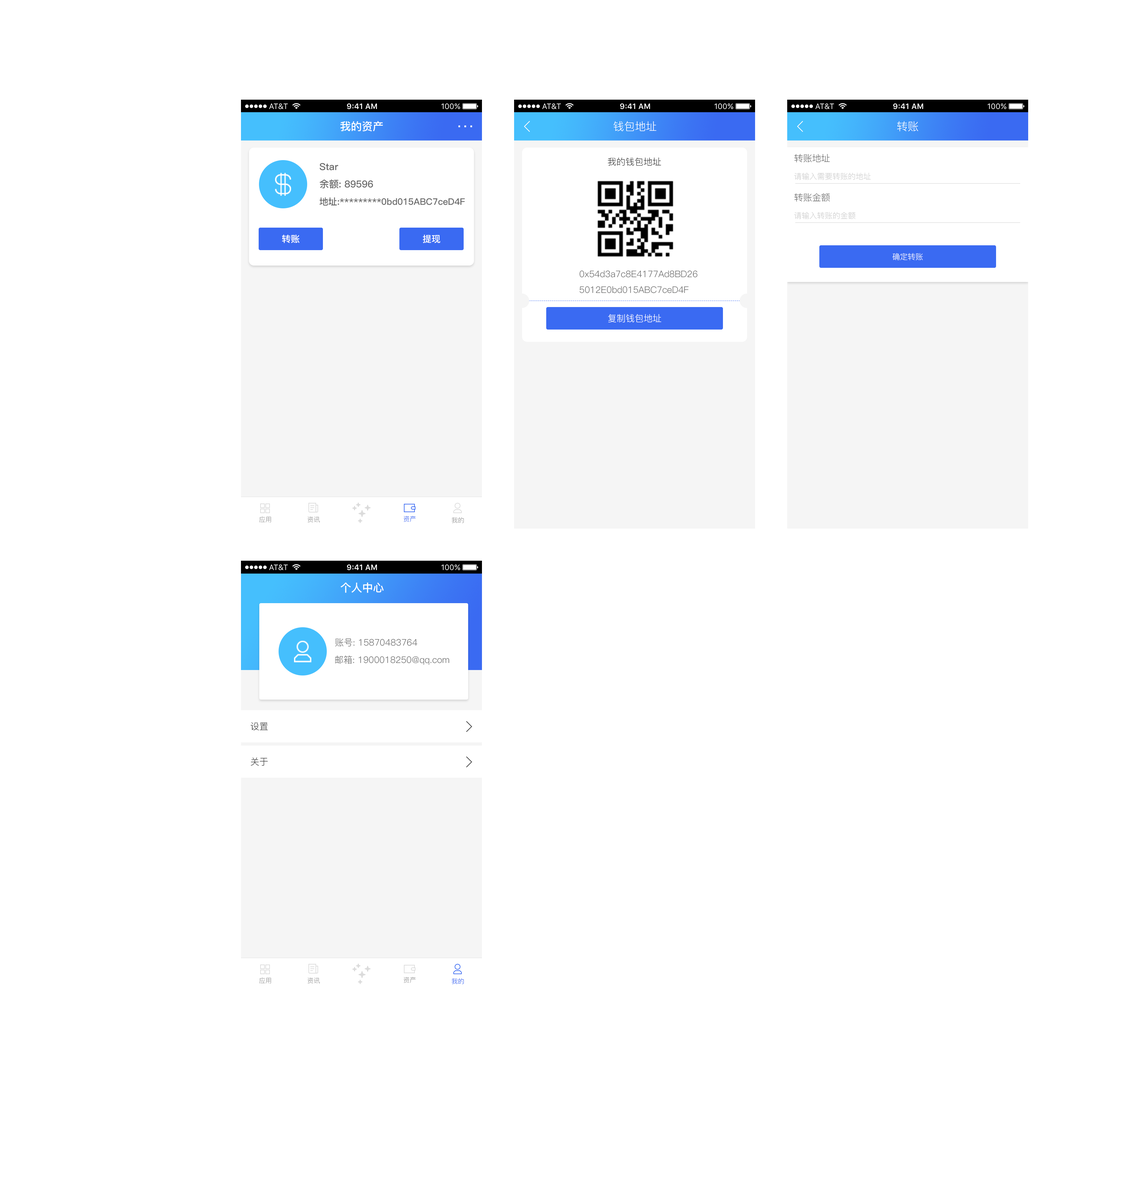
<style>
.page{position:relative;width:1140px;height:1187px;background:#ffffff}
.page>*{position:absolute;margin:0}
.t1{font:10.9px "PingFang-SC-Bold";color:#ffffff}
.t2{font:10.9px "PingFang-SC-Regular";color:#ffffff}
.t3{font:9px "PingFang-SC-Regular";color:#333333}
.t4{font:9px "PingFang-SC-Regular";color:#666666}
.t5{font:9.6px "PingFang-SC-Bold";color:#666666}
.t6{font:7.7px "PingFang-SC-Regular";color:#cccccc}
.t7{font:9px "PingFang-SC-Bold";color:#666666}
.t8{font:9px "PingFang-SC-Bold";color:#ffffff}
.t9{font:7.7px "PingFang-SC-Regular";color:#ffffff}
.t10{font:9px "PingFang-SC-Regular";color:#ffffff}
.t11{font:6.4px "PingFang-SC-Regular";color:#999999}
.t12{font:6.4px "PingFang-SC-Regular";color:#3a6af2}
</style>
<div class="page">
<p class="t1" style="left:340px;top:121px;width:43px;height:10px">我的资产</p>
<p class="t2" style="left:614px;top:121px;width:43px;height:10px">钱包地址</p>
<p class="t2" style="left:897px;top:121px;width:22px;height:10px">转账</p>
<p class="t3" style="left:608px;top:158px;width:54px;height:8px">我的钱包地址</p>
<p class="t4" style="left:795px;top:154px;width:35px;height:8px">转账地址</p>
<p class="t5" style="left:320px;top:163px;width:18px;height:7px">Star</p>
<p class="t6" style="left:794px;top:173px;width:77px;height:7px">请输入需要转账的地址</p>
<p class="t5" style="left:320px;top:179px;width:53px;height:9px">余额: 89596</p>
<p class="t7" style="left:320px;top:197px;width:145px;height:9px">地址:*********0bd015ABC7ceD4F</p>
<p class="t4" style="left:795px;top:193px;width:35px;height:9px">转账金额</p>
<p class="t6" style="left:794px;top:212px;width:62px;height:7px">请输入转账的金额</p>
<p class="t8" style="left:282px;top:235px;width:18px;height:8px">转账</p>
<p class="t8" style="left:423px;top:235px;width:17px;height:8px">提现</p>
<p class="t9" style="left:893px;top:253px;width:30px;height:7px">确定转账</p>
<p class="t4" style="left:580px;top:270px;width:118px;height:23px">0x54d3a7c8E4177Ad8BD26<br>5012E0bd015ABC7ceD4F</p>
<p class="t10" style="left:608px;top:314px;width:54px;height:8px">复制钱包地址</p>
<p class="t11" style="left:259px;top:516px;width:12px;height:6px">应用</p>
<p class="t11" style="left:308px;top:516px;width:12px;height:7px">资讯</p>
<p class="t12" style="left:404px;top:516px;width:12px;height:6px">资产</p>
<p class="t11" style="left:452px;top:517px;width:12px;height:6px">我的</p>
<p class="t1" style="left:341px;top:582px;width:43px;height:11px">个人中心</p>
<p class="t4" style="left:335px;top:638px;width:83px;height:8px">账号: 15870483764</p>
<p class="t4" style="left:335px;top:655px;width:114px;height:10px">邮箱: 1900018250@qq.com</p>
<p class="t3" style="left:251px;top:722px;width:17px;height:8px">设置</p>
<p class="t3" style="left:251px;top:757px;width:17px;height:9px">关于</p>
<p class="t11" style="left:259px;top:977px;width:12px;height:6px">应用</p>
<p class="t11" style="left:308px;top:977px;width:12px;height:7px">资讯</p>
<p class="t11" style="left:404px;top:977px;width:12px;height:6px">资产</p>
<p class="t12" style="left:452px;top:978px;width:12px;height:6px">我的</p>
</div>
